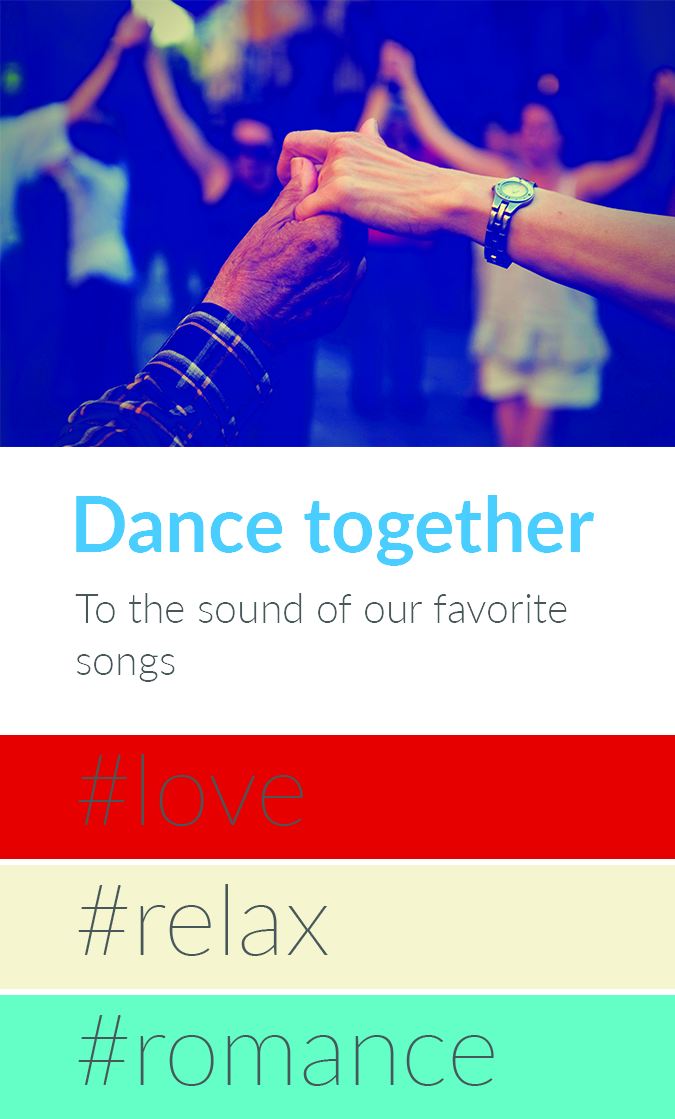
<style>
.page{position:relative;width:675px;height:1119px;background:#ffffff}
.page>*{position:absolute;margin:0}
.t1{font:76px "Lato-Bold";color:#4acdff}
.t2{font:41px/52px "Lato-Light";color:#48585a}
</style>
<div class="page">
<p class="t1" style="left:76px;top:495px;width:519px;height:71px">Dance together</p>
<p class="t2" style="left:75px;top:593px;width:492px;height:89px;text-align:right">To the sound of our favorite songs</p>
</div>
